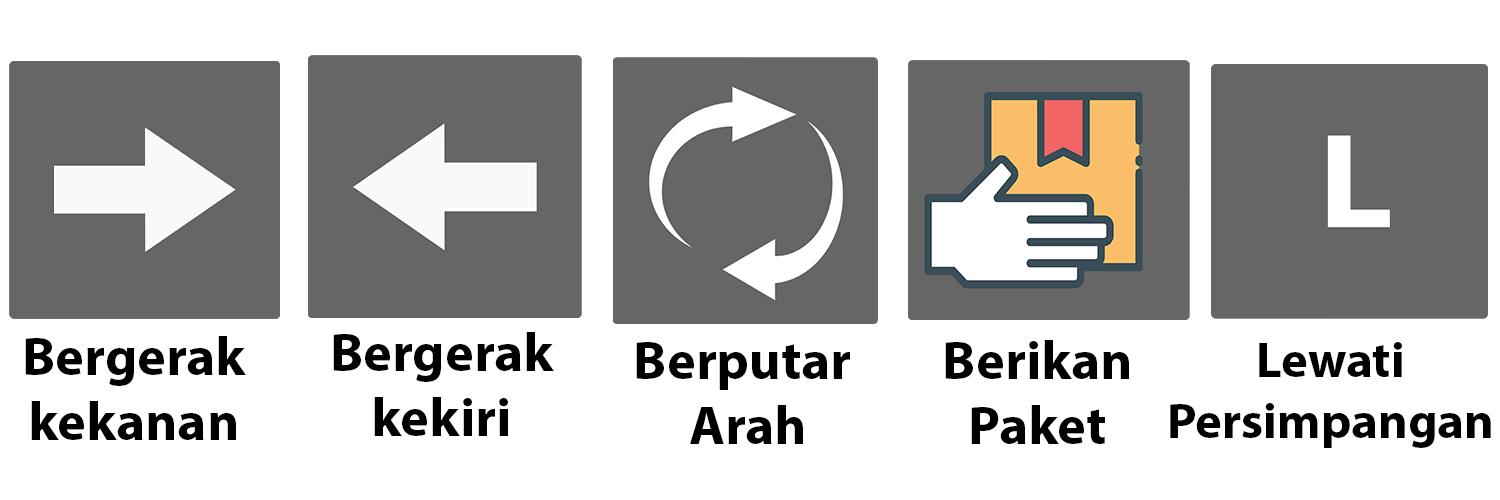
<style>
.page{position:relative;width:1500px;height:500px;background:#ffffff}
.page>*{position:absolute;margin:0}
.t1{font:54.3px "MyriadPro-Bold";color:#000000}
.t2{font:50.2px "MyriadPro-Bold";color:#000000}
</style>
<div class="page">
<p class="t1" style="left:25px;top:336px;width:221px;height:104px;text-align:center">Bergerak<br>kekanan</p>
<p class="t1" style="left:333px;top:332px;width:221px;height:104px;text-align:center">Bergerak<br>kekiri</p>
<p class="t1" style="left:636px;top:342px;width:215px;height:102px;text-align:center">Berputar <br>Arah</p>
<p class="t1" style="left:945px;top:340px;width:184px;height:104px;text-align:center">Berikan<br>Paket</p>
<p class="t2" style="left:1170px;top:342px;width:321px;height:106px;text-align:center">Lewati<br>Persimpangan</p>
</div>
